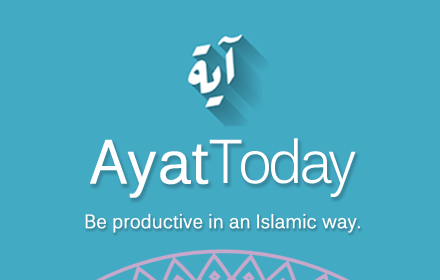
<style>
.page{position:relative;width:440px;height:280px;background:#43aac4}
.page>*{position:absolute;margin:0}
.t1{font:61px "Kalinga";letter-spacing:-0.075em;color:#ffffff;scale:0.91 1}
.t2{font:61px "Kalinga";color:#ffffff;font-weight:bold;scale:0.91 1}
.t3{font:18.9px "Kalinga";color:#ffffff;font-weight:bold;scale:0.91 1}
</style>
<div class="page">
<p class="t1" style="left:90px;top:138px;width:266px;height:60px"><span class="t2">Ayat</span>Today</p>
<p class="t3" style="left:85px;top:213px;width:275px;height:20px">Be productive in an Islamic way.</p>
</div>
